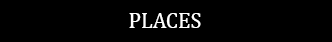
<style>
.page{position:relative;width:332px;height:42px;background:#000000}
.page>*{position:absolute;margin:0}
.t1{font:21.7px "Cambria";color:#ffffff}
</style>
<div class="page">
<p class="t1" style="left:129px;top:13px;width:72px;height:15px">PLACES</p>
</div>
